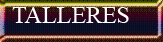
<style>
.page{position:relative;width:163px;height:42px;background:#34060f}
.page>*{position:absolute;margin:0}
.t1{font:24px "TimesNewRomanPSMT";color:#ffffff}
</style>
<div class="page">
<p class="t1" style="left:12px;top:3px;width:118px;height:27px">TALLERES</p>
</div>
